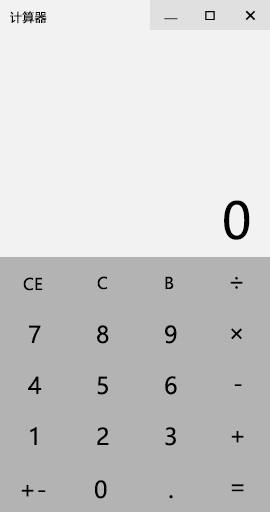
<style>
.page{position:relative;width:270px;height:512px;background:#b3b3b3}
.page>*{position:absolute;margin:0}
.t1{font:12px "MicrosoftYaHei";letter-spacing:0.025em;color:#000000}
.t2{font:20px "MicrosoftYaHei";letter-spacing:0.025em;color:#000000}
.t3{font:12px "MicrosoftYaHei";letter-spacing:0.025em}
.t4{font:50px "MicrosoftYaHei";letter-spacing:0.025em;color:#000000}
.t5{font:16px "MicrosoftYaHei";letter-spacing:0.025em;color:#000000}
.t6{font:23px "MicrosoftYaHei";letter-spacing:0.025em;color:#000000}
.t7{font:25px "MicrosoftYaHei";letter-spacing:0.025em;color:#000000}
</style>
<div class="page">
<p class="t1" style="left:10px;top:11px;width:37px;height:13px">计算器</p>
<p class="t2" style="left:245px;top:10px;width:11px;height:11px">×</p>
<p class="t3" style="left:164px;top:18px;width:14px;height:2px">—</p>
<p class="t4" style="left:224px;top:200px;width:26px;height:40px">0</p>
<p class="t5" style="left:23px;top:277px;width:20px;height:14px">CE</p>
<p class="t5" style="left:97px;top:276px;width:10px;height:14px">C</p>
<p class="t5" style="left:165px;top:276px;width:9px;height:13px">B</p>
<p class="t6" style="left:230px;top:276px;width:13px;height:13px">÷</p>
<p class="t6" style="left:29px;top:325px;width:12px;height:18px">7</p>
<p class="t6" style="left:97px;top:325px;width:12px;height:19px">8</p>
<p class="t6" style="left:165px;top:325px;width:12px;height:19px">9</p>
<p class="t6" style="left:231px;top:328px;width:11px;height:12px">×</p>
<p class="t6" style="left:28px;top:376px;width:14px;height:18px">4</p>
<p class="t6" style="left:97px;top:376px;width:11px;height:19px">5</p>
<p class="t6" style="left:165px;top:376px;width:12px;height:19px">6</p>
<p class="t6" style="left:234px;top:384px;width:8px;height:2px">-</p>
<p class="t6" style="left:30px;top:427px;width:7px;height:18px">1</p>
<p class="t6" style="left:97px;top:427px;width:12px;height:18px">2</p>
<p class="t6" style="left:165px;top:427px;width:11px;height:19px">3</p>
<p class="t6" style="left:231px;top:431px;width:13px;height:12px">+</p>
<p class="t6" style="left:21px;top:485px;width:25px;height:12px">+-</p>
<p class="t6" style="left:95px;top:480px;width:12px;height:19px">0</p>
<p class="t6" style="left:231px;top:484px;width:13px;height:8px">=</p>
<p class="t7" style="left:169px;top:495px;width:4px;height:4px">.</p>
</div>
